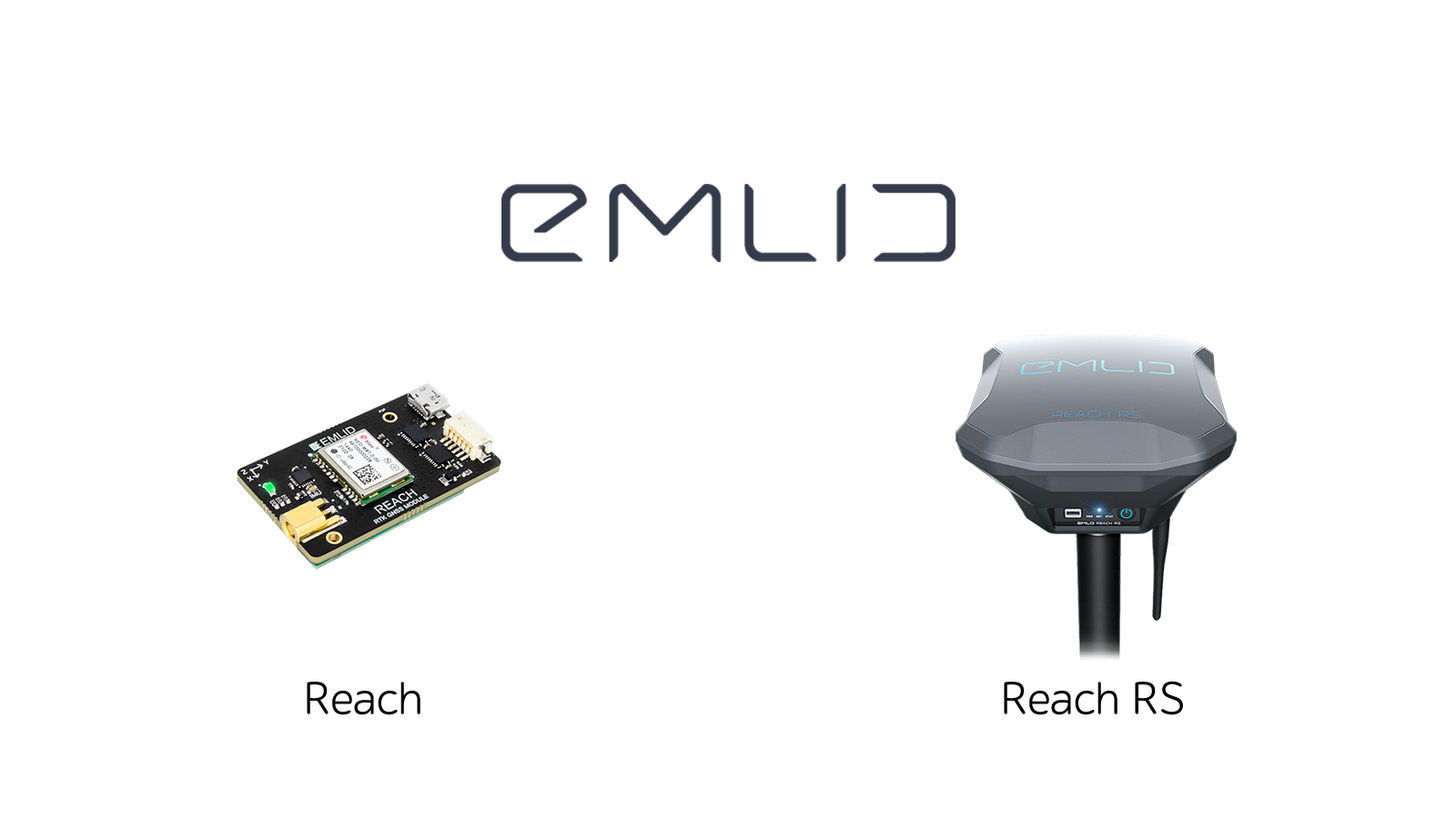
<style>
.page{position:relative;width:1456px;height:819px;background:#ffffff}
.page>*{position:absolute;margin:0}
.t1{font:46.2px "ALSSchlangesans";color:#000000}
</style>
<div class="page">
<p class="t1" style="left:307px;top:682px;width:113px;height:33px">Reach</p>
<p class="t1" style="left:1004px;top:681px;width:179px;height:34px">Reach RS</p>
</div>
